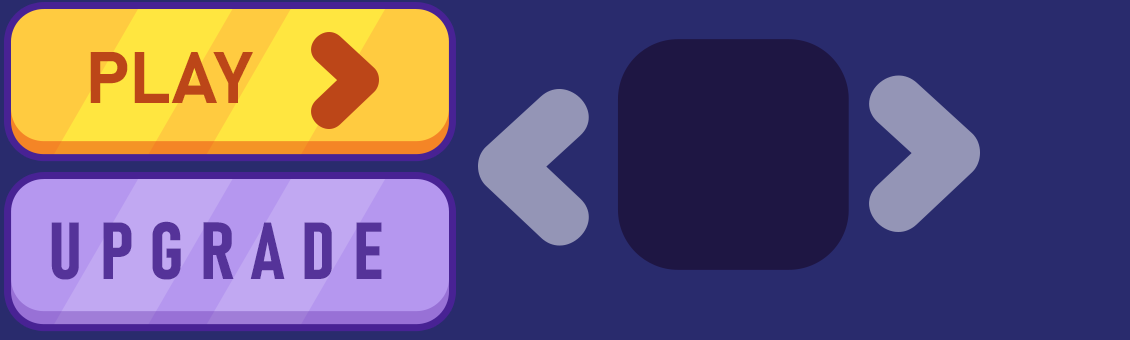
<style>
.page{position:relative;width:1130px;height:340px;background:#292b6d}
.page>*{position:absolute;margin:0}
.t1{font:72px "Bahnschrift-Bold";color:#bc4618;font-weight:bold}
.t2{font:79.7px "Bahnschrift-BoldCondensed";color:#553399}
</style>
<div class="page">
<p class="t1" style="left:90px;top:52px;width:163px;height:51px">PLAY</p>
<p class="t2" style="left:51px;top:221px;width:331px;height:59px">UPGRADE</p>
</div>
